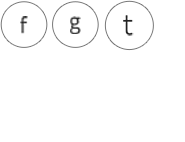
<style>
.page{position:relative;width:185px;height:142px;background:#ffffff}
.page>*{position:absolute;margin:0}
.t1{font:22.3px "TitilliumWeb-Light";letter-spacing:0.02em;color:#222222}
.t2{font:28.8px "TitilliumWeb-Light";letter-spacing:0.02em;color:#222222}
</style>
<div class="page">
<p class="t1" style="left:20px;top:16px;width:8px;height:18px">f</p>
<p class="t1" style="left:70px;top:16px;width:11px;height:18px">g</p>
<p class="t2" style="left:123px;top:15px;width:11px;height:21px">t</p>
</div>
